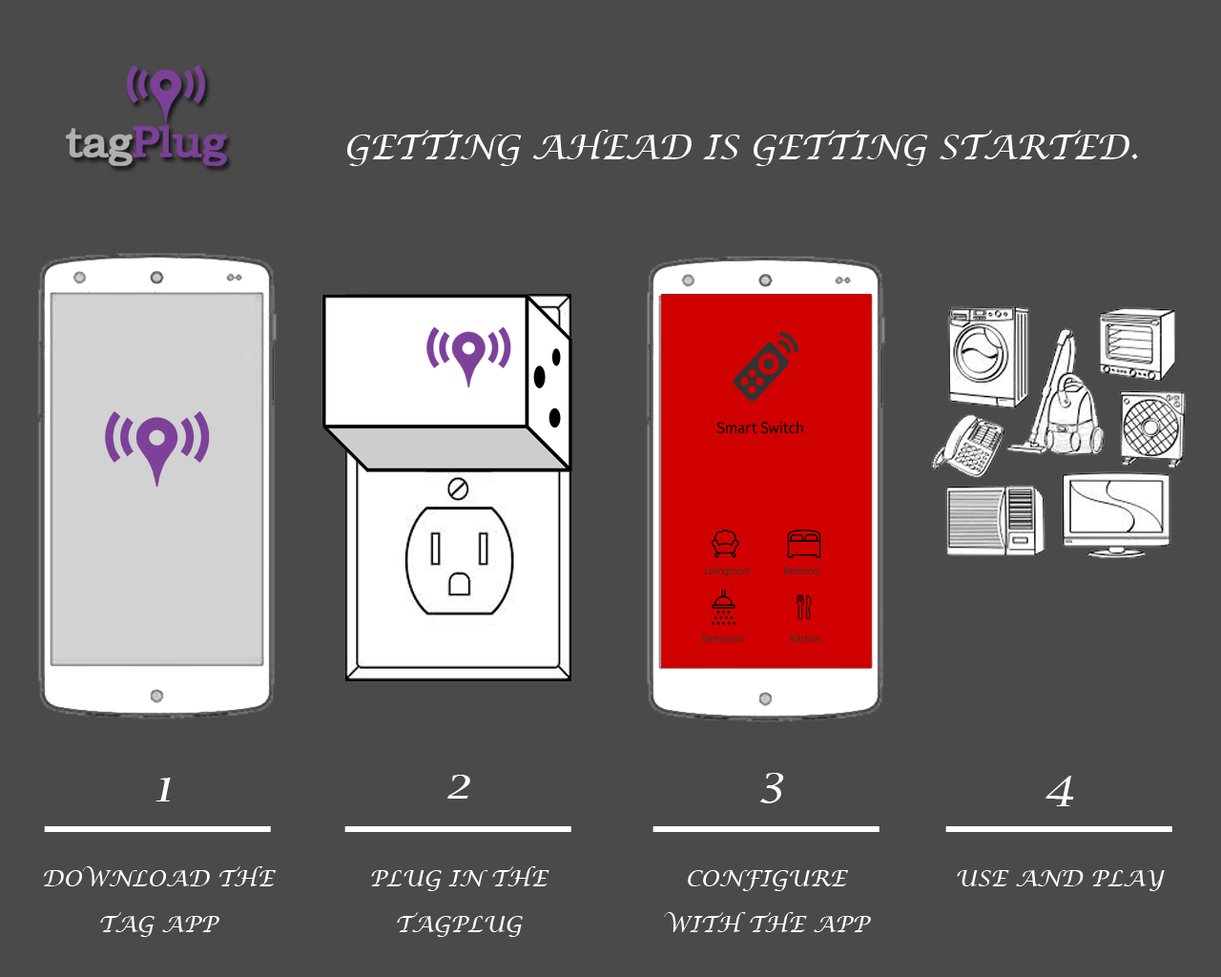
<style>
.page{position:relative;width:1221px;height:977px;background:#4a4a4b}
.page>*{position:absolute;margin:0}
.t1{font:34.3px "LucidaCalligraphy-Italic";color:#ffffff;text-transform:uppercase}
.t2{font:45.8px "LucidaCalligraphy-Italic";color:#ffffff;text-transform:uppercase}
.t3{font:22.9px/45.8px "LucidaCalligraphy-Italic";color:#ffffff;text-transform:uppercase}
.t4{font:22.9px "LucidaCalligraphy-Italic";color:#ffffff;text-transform:uppercase}
</style>
<div class="page">
<p class="t1" style="left:347px;top:130px;width:791px;height:36px">getting ahead is getting started.</p>
<p class="t2" style="left:760px;top:773px;width:24px;height:30px">3</p>
<p class="t2" style="left:155px;top:777px;width:16px;height:24px">1</p>
<p class="t2" style="left:447px;top:774px;width:23px;height:24px">2</p>
<p class="t2" style="left:1045px;top:775px;width:29px;height:31px">4</p>
<p class="t3" style="left:44px;top:866px;width:232px;height:71px;text-align:center">Download the tag app</p>
<p class="t3" style="left:371px;top:866px;width:178px;height:71px;text-align:center">Plug in the tagplug</p>
<p class="t3" style="left:664px;top:870px;width:207px;height:62px;text-align:center">Configure  with the app</p>
<p class="t4" style="left:957px;top:870px;width:208px;height:21px">use and Play</p>
</div>
